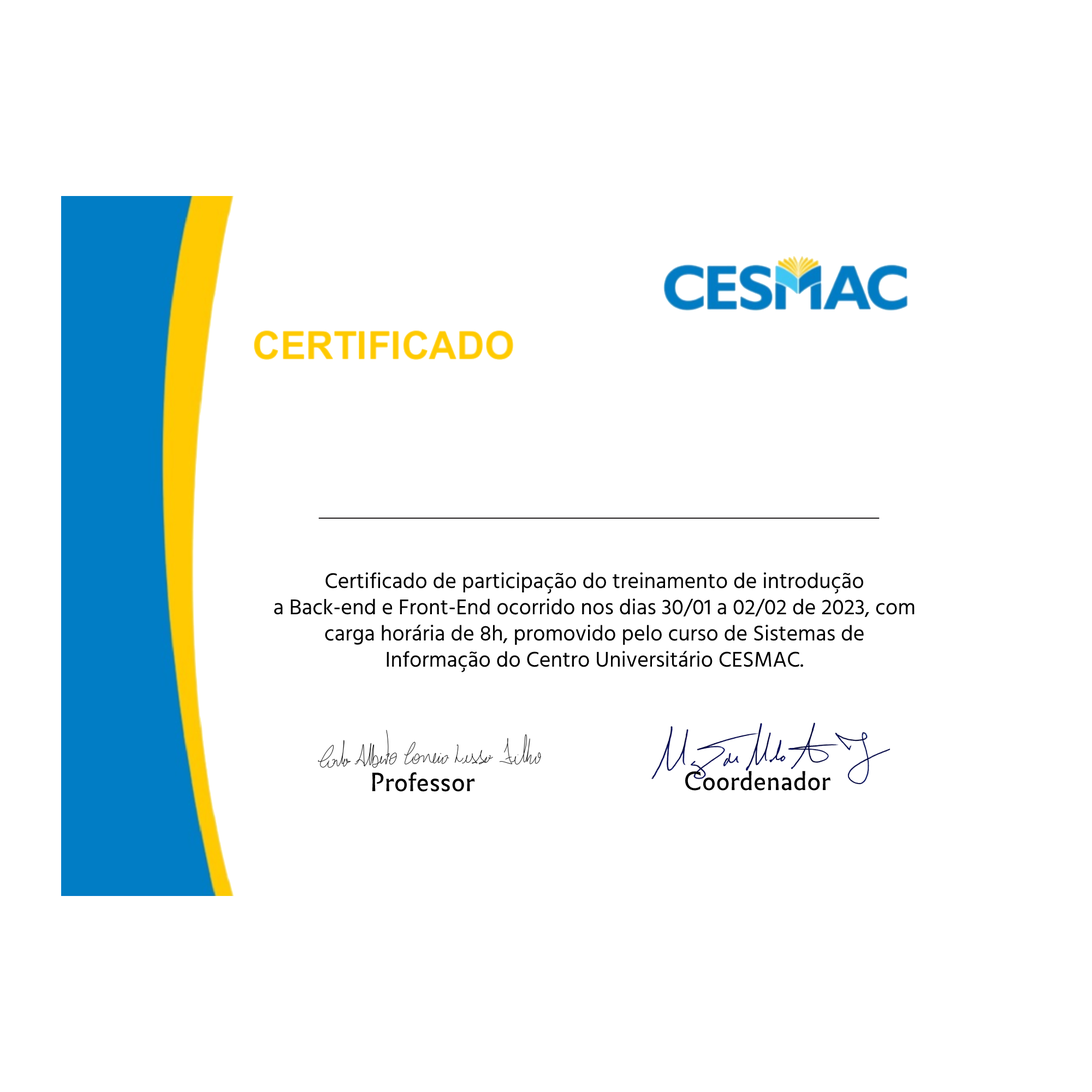
<style>
.page{position:relative;width:1092px;height:1092px;background:#ffffff}
.page>*{position:absolute;margin:0}
.t1{font:21.8px "HindGuntur-Regular";color:#000000}
.t2{font:24.6px "Infini-Regular";color:#000000}
</style>
<div class="page">
<p class="t1" style="left:274px;top:572px;width:641px;height:101px;text-align:center">Certificado de participação do treinamento de introdução<br>a Back-end e Front-End ocorrido nos dias 30/01 a 02/02 de 2023, com<br>carga horária de 8h, promovido pelo curso de Sistemas de<br>Informação do Centro Universitário CESMAC.</p>
<p class="t2" style="left:372px;top:772px;width:103px;height:20px">Professor</p>
<p class="t2" style="left:685px;top:771px;width:146px;height:20px">Coordenador</p>
</div>
